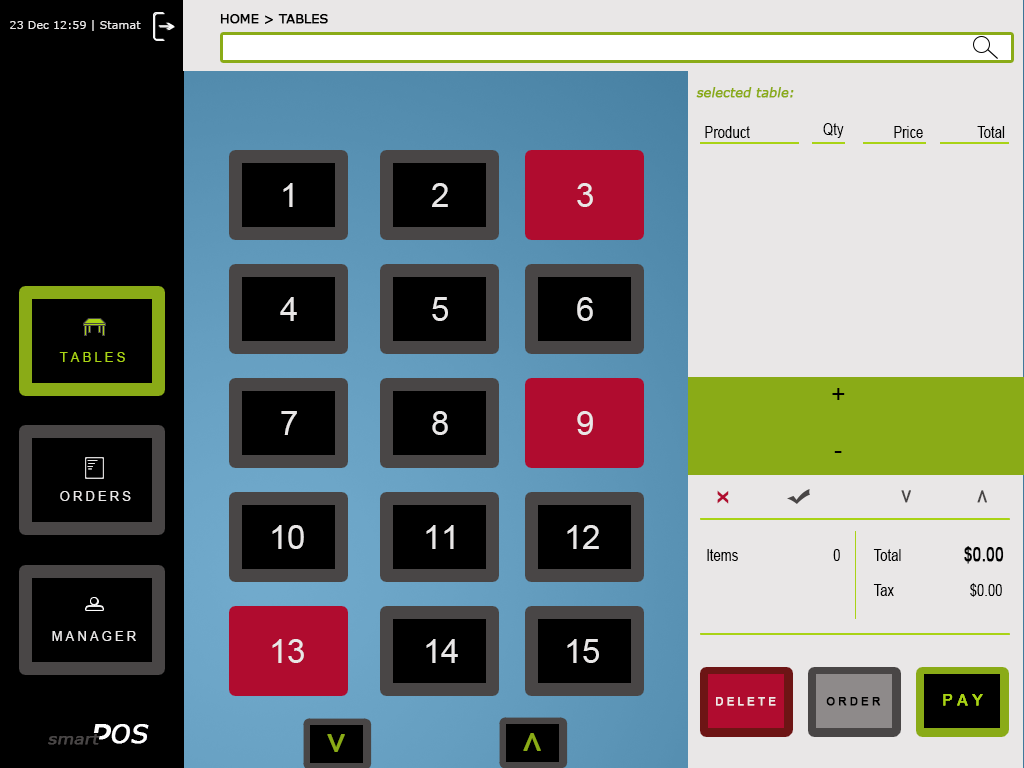
<style>
.page{position:relative;width:1024px;height:768px;background:#e9e7e7}
.page>*{position:absolute;margin:0}
.t1{font:12.5px "Verdana";color:#000000;font-weight:bold}
.t2{font:11.2px "Verdana";color:#e9e7e7}
.t3{font:12.5px "Verdana";color:#8aab17;font-weight:bold;font-style:italic}
.t4{font:16.2px "ArialMT";color:#000000;scale:0.81 1}
.t5{font:33.3px "ArialMT";color:#e9e7e7}
.t6{font:12.5px "ArialMT";color:#a9d316}
.t7{font:25px "ArialMT";color:#000000}
.t8{font:12.5px "ArialMT";color:#e9e7e7}
.t9{font:19.8px "ArialMT";color:#b00c2f;font-weight:bold;scale:1.23 1}
.t10{font:19.8px "ArialMT";color:#494646;font-weight:bold;scale:1.23 1}
.t11{font:18.8px "ArialMT";color:#000000;font-weight:bold;scale:0.81 1}
.t12{font:10.6px "ArialMT";color:#efe7e7;font-weight:bold}
.t13{font:10.6px "ArialMT";color:#000000;font-weight:bold}
.t14{font:14.6px "ArialMT";color:#a9d316;font-weight:bold}
.t15{font:25px "Verdana";color:#ffffff;font-weight:bold;font-style:italic}
.t16{font:15px "Verdana";color:#494646;font-weight:bold;font-style:italic;scale:1.11 1}
.t17{font:34.9px "ArialMT";color:#8aab17;font-weight:bold}
</style>
<div class="page">
<p class="t1" style="left:220px;top:14px;width:108px;height:10px">HOME &gt; TABLES</p>
<p class="t2" style="left:10px;top:20px;width:131px;height:11px">23 Dec 12:59 | Stamat</p>
<p class="t3" style="left:696px;top:87px;width:98px;height:11px">selected table:</p>
<p class="t4" style="left:705px;top:126px;width:45px;height:12px">Product</p>
<p class="t4" style="left:823px;top:123px;width:21px;height:15px">Qty</p>
<p class="t4" style="left:894px;top:126px;width:29px;height:12px">Price</p>
<p class="t4" style="left:977px;top:126px;width:28px;height:12px">Total</p>
<p class="t5" style="left:283px;top:183px;width:10px;height:24px">1</p>
<p class="t5" style="left:432px;top:183px;width:16px;height:24px">2</p>
<p class="t5" style="left:577px;top:183px;width:16px;height:24px">3</p>
<p class="t5" style="left:280px;top:297px;width:17px;height:24px">4</p>
<p class="t5" style="left:432px;top:297px;width:16px;height:24px">5</p>
<p class="t5" style="left:577px;top:297px;width:16px;height:24px">6</p>
<p class="t6" style="left:59px;top:352px;width:66px;height:10px">T A B L E S</p>
<p class="t7" style="left:832px;top:388px;width:13px;height:12px">+</p>
<p class="t5" style="left:281px;top:411px;width:16px;height:24px">7</p>
<p class="t5" style="left:432px;top:411px;width:16px;height:24px">8</p>
<p class="t5" style="left:577px;top:411px;width:16px;height:24px">9</p>
<p class="t7" style="left:834px;top:451px;width:8px;height:2px">-</p>
<p class="t8" style="left:60px;top:491px;width:71px;height:10px">O R D E R S</p>
<p class="t9" style="left:717px;top:490px;width:12px;height:14px;rotate:-90deg">x</p>
<p class="t10" style="left:901px;top:490px;width:10px;height:13px;rotate:90deg">&gt;</p>
<p class="t10" style="left:977px;top:490px;width:10px;height:13px;rotate:-90deg">&gt;</p>
<p class="t5" style="left:272px;top:525px;width:32px;height:24px">10</p>
<p class="t5" style="left:426px;top:525px;width:28px;height:24px">11</p>
<p class="t5" style="left:567px;top:525px;width:32px;height:24px">12</p>
<p class="t4" style="left:707px;top:549px;width:31px;height:12px">Items</p>
<p class="t4" style="left:833px;top:549px;width:7px;height:12px">0</p>
<p class="t4" style="left:873px;top:549px;width:28px;height:12px">Total</p>
<p class="t11" style="left:964px;top:546px;width:40px;height:18px">$0.00</p>
<p class="t4" style="left:873px;top:584px;width:21px;height:12px">Tax</p>
<p class="t4" style="left:970px;top:583px;width:32px;height:14px">$0.00</p>
<p class="t8" style="left:52px;top:631px;width:84px;height:10px">M A N A G E R</p>
<p class="t5" style="left:272px;top:639px;width:32px;height:24px">13</p>
<p class="t5" style="left:426px;top:639px;width:32px;height:24px">14</p>
<p class="t5" style="left:567px;top:639px;width:32px;height:24px">15</p>
<p class="t12" style="left:716px;top:697px;width:60px;height:9px">D E L E T E</p>
<p class="t13" style="left:826px;top:697px;width:55px;height:9px">O R D E R</p>
<p class="t14" style="left:943px;top:694px;width:40px;height:12px">P A Y</p>
<p class="t14" style="left:943px;top:694px;width:40px;height:12px">P A Y</p>
<p class="t15" style="left:111px;top:724px;width:38px;height:20px">OS</p>
<p class="t15" style="left:112px;top:724px;width:38px;height:20px">OS</p>
<p class="t16" style="left:48px;top:734px;width:52px;height:11px">smart</p>
<p class="t17" style="left:327px;top:734px;width:18px;height:18px;rotate:-90deg">&lt;</p>
<p class="t17" style="left:523px;top:733px;width:18px;height:18px;rotate:-90deg">&gt;</p>
</div>
